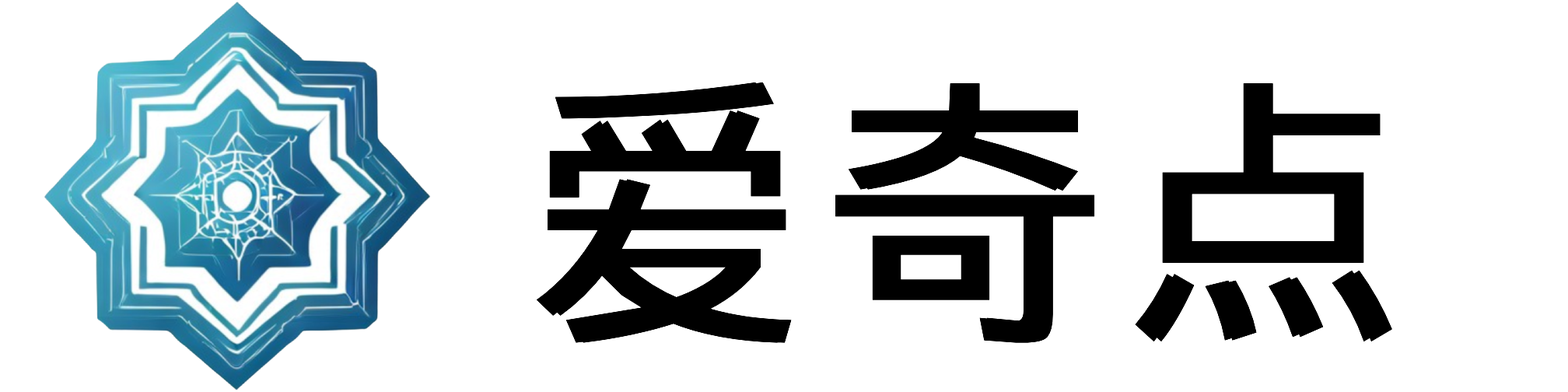
<style>
.page{position:relative;width:1568px;height:392px;background:#ffffff}
.page>*{position:absolute;margin:0}
.t1{font:288.4px "DroidSansFallback";letter-spacing:0.04em;color:#000000;font-weight:bold}
</style>
<div class="page">
<p class="t1" style="left:536px;top:82px;width:856px;height:261px">爱奇点</p>
</div>
